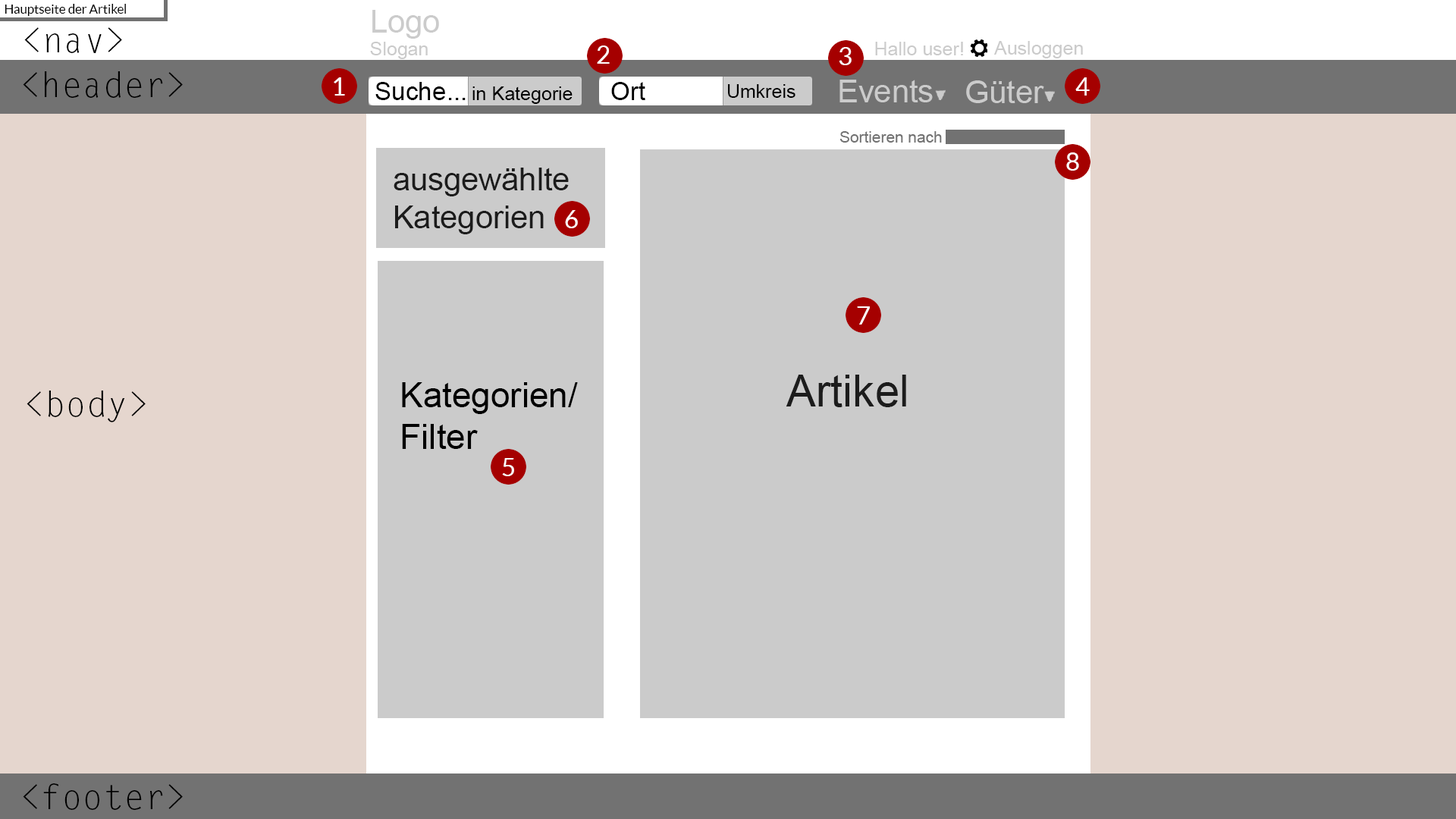
<style>
.page{position:relative;width:1456px;height:819px;background:#e5d6ce}
.page>*{position:absolute;margin:0}
.t1{font:12.6px "Lato-Regular";color:#000000}
.t2{font:19px "ArialMT";color:#cbcbcb}
.t3{font:31.6px "ArialMT";color:#cbcbcb}
.t4{font:34.8px "LetterGothicStd";color:#000000}
.t5{font:25.3px "Lato-Regular";color:#ffffff}
.t6{font:25.3px "ArialMT";color:#000000}
.t7{font:19px "ArialMT";color:#000000}
.t8{font:15.8px "ArialMT";color:#727272}
.t9{font:31.6px "ArialMT";color:#1c1c1c}
.t10{font:44.2px "ArialMT";color:#1c1c1c}
.t11{font:34.8px "ArialMT";color:#000000}
</style>
<div class="page">
<p class="t1" style="left:5px;top:4px;width:121px;height:12px">Hauptseite der Artikel</p>
<p class="t2" style="left:370px;top:10px;width:69px;height:49px"><span class="t3">Logo<br></span>Slogan</p>
<p class="t4" style="left:24px;top:27px;width:98px;height:26px">&lt;nav&gt;</p>
<p class="t2" style="left:875px;top:42px;width:88px;height:13px">Hallo user!</p>
<p class="t2" style="left:994px;top:41px;width:89px;height:17px">Ausloggen</p>
<p class="t5" style="left:597px;top:45px;width:13px;height:19px">2</p>
<p class="t5" style="left:839px;top:47px;width:13px;height:18px">3</p>
<p class="t4" style="left:23px;top:71px;width:160px;height:27px">&lt;header&gt;</p>
<p class="t5" style="left:334px;top:77px;width:11px;height:19px">1</p>
<p class="t5" style="left:1075px;top:77px;width:15px;height:19px">4</p>
<p class="t6" style="left:375px;top:82px;width:91px;height:18px">Suche...</p>
<p class="t7" style="left:472px;top:86px;width:101px;height:18px">in Kategorie</p>
<p class="t6" style="left:611px;top:82px;width:34px;height:18px">Ort</p>
<p class="t7" style="left:728px;top:84px;width:67px;height:14px">Umkreis</p>
<p class="t3" style="left:839px;top:80px;width:94px;height:22px">Events</p>
<p class="t3" style="left:966px;top:80px;width:78px;height:23px">Güter</p>
<p class="t8" style="left:839px;top:131px;width:103px;height:12px">Sortieren nach</p>
<p class="t5" style="left:1066px;top:152px;width:13px;height:19px">8</p>
<p class="t9" style="left:394px;top:168px;width:175px;height:66px">ausgewählte<br>Kategorien</p>
<p class="t5" style="left:565px;top:210px;width:13px;height:18px">6</p>
<p class="t5" style="left:857px;top:306px;width:13px;height:19px">7</p>
<p class="t10" style="left:786px;top:375px;width:120px;height:32px">Artikel</p>
<p class="t11" style="left:402px;top:382px;width:176px;height:67px">Kategorien/<br>Filter</p>
<p class="t4" style="left:27px;top:391px;width:119px;height:31px">&lt;body&gt;</p>
<p class="t5" style="left:502px;top:458px;width:12px;height:18px">5</p>
<p class="t4" style="left:23px;top:783px;width:160px;height:27px">&lt;footer&gt;</p>
</div>
